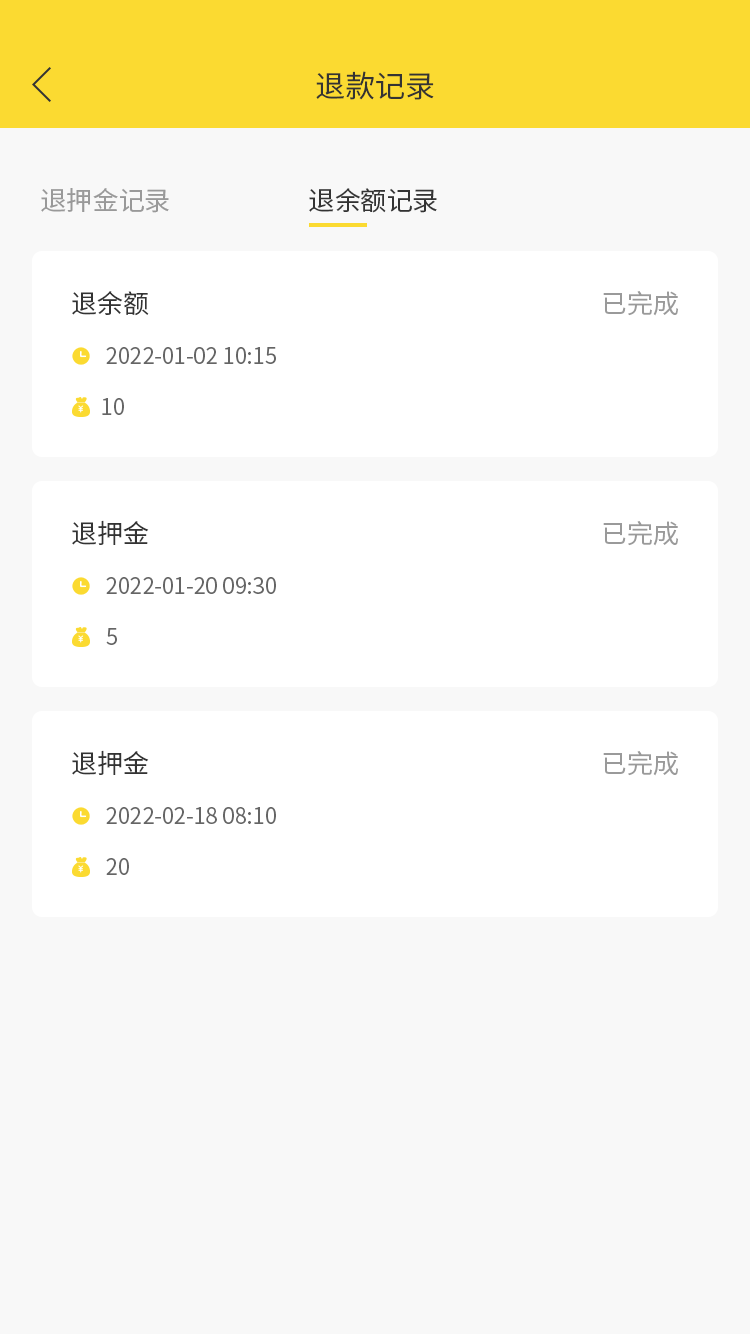
<style>
.page{position:relative;width:750px;height:1334px;background:#f8f8f8}
.page>*{position:absolute;margin:0}
.t1{font:30px "SourceHanSansSC-Normal";color:#333333}
.t2{font:26px "SourceHanSansSC-Regular";color:#999999}
.t3{font:26px "SourceHanSansSC-Regular";color:#333333}
.t4{font:26px "SourceHanSansSC-Normal";color:#333333}
.t5{font:26px "SourceHanSansSC-Normal";color:#9a9a9a}
.t6{font:22px "SourceHanSansSC-Normal";color:#656565}
</style>
<div class="page">
<p class="t1" style="left:316px;top:71px;width:118px;height:29px">退款记录</p>
<p class="t2" style="left:41px;top:188px;width:128px;height:25px">退押金记录</p>
<p class="t3" style="left:309px;top:188px;width:128px;height:25px">退余额记录</p>
<p class="t4" style="left:72px;top:291px;width:77px;height:25px">退余额</p>
<p class="t5" style="left:603px;top:291px;width:75px;height:25px">已完成</p>
<p class="t6" style="left:106px;top:347px;width:170px;height:17px">2022-01-02 10:15</p>
<p class="t6" style="left:102px;top:398px;width:22px;height:17px">10</p>
<p class="t4" style="left:72px;top:520px;width:77px;height:25px">退押金</p>
<p class="t5" style="left:603px;top:521px;width:75px;height:25px">已完成</p>
<p class="t6" style="left:106px;top:577px;width:170px;height:17px">2022-01-20 09:30</p>
<p class="t6" style="left:106px;top:628px;width:11px;height:17px">5</p>
<p class="t4" style="left:72px;top:750px;width:77px;height:25px">退押金</p>
<p class="t5" style="left:603px;top:751px;width:75px;height:25px">已完成</p>
<p class="t6" style="left:106px;top:807px;width:170px;height:17px">2022-02-18 08:10</p>
<p class="t6" style="left:106px;top:858px;width:23px;height:17px">20</p>
</div>
